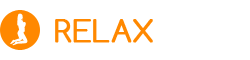
<style>
.page{position:relative;width:250px;height:60px;background:#ffffff}
.page>*{position:absolute;margin:0}
.t1{font:30px "Comfortaa";color:#ff8800;text-transform:uppercase;font-weight:bold}
.t2{font:30px "Comfortaa-Light";color:#ffffff;text-transform:uppercase}
</style>
<div class="page">
<p class="t1" style="left:55px;top:18px;width:172px;height:25px">Relax<span class="t2">tube</span></p>
</div>
